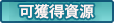
<style>
.page{position:relative;width:114px;height:23px}
.page>*{position:absolute;margin:0}
.t1{font:15px "GothicMB101Pr6N-Medium";color:#fff4f2}
</style>
<div class="page">
<p class="t1" style="left:19px;top:4px;width:75px;height:15px">可獲得資源</p>
</div>
